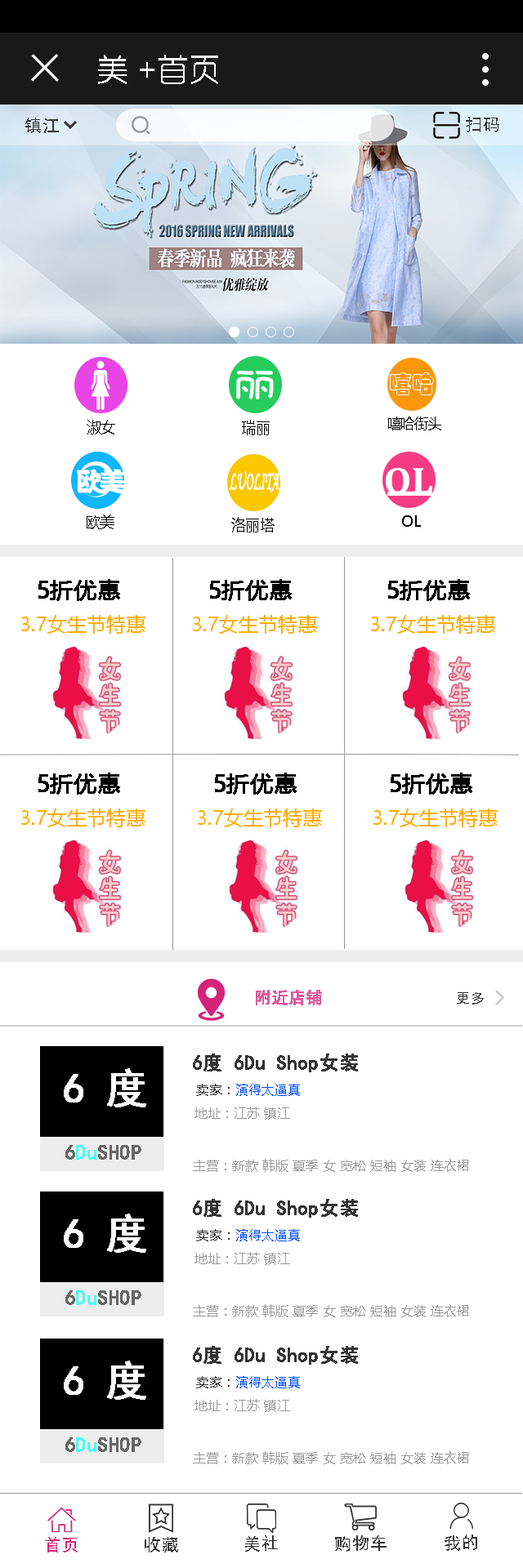
<style>
.page{position:relative;width:523px;height:1568px;background:#ffffff}
.page>*{position:absolute;margin:0}
.t1{font:31px "RTWSYueGoG0v1-ExLight";color:#ffffff;font-weight:bold}
.t2{font:29.4px "SimHei";color:#333333}
.t3{font:24px "STCaiyun";color:#fffefe;scale:0.93 1}
.t4{font:15.6px "MicrosoftYaHei";color:#000000;scale:0.94 1}
.t5{font:15.8px "MicrosoftYaHei";color:#000000;scale:0.93 1}
.t6{font:14.6px "MicrosoftYaHei";color:#000000;scale:0.93 1}
.t7{font:15.7px "MicrosoftYaHei";color:#000000;scale:0.93 1}
.t8{font:15.9px "MicrosoftYaHei";color:#000000;scale:0.92 1}
.t9{font:15.5px "MicrosoftYaHei";color:#000000;scale:0.95 1}
.t10{font:22.9px "MicrosoftYaHei";color:#000000;font-weight:bold}
.t11{font:19.6px "MicrosoftYaHei";color:#ffae00}
.t12{font:27.8px "SimHei";color:#df5a9b;font-weight:bold}
.t13{font:24.5px "SimHei";color:#333333}
.t14{font:19.6px "SimHei";color:#333333;font-weight:bold}
.t15{font:41.4px "SimHei";color:#ffffff;font-weight:bold}
.t16{font:13.1px "MicrosoftYaHei";color:#004eff}
.t17{font:13.1px "MicrosoftYaHei";color:#333333}
.t18{font:13.1px "MicrosoftYaHei";color:#999999}
.t19{font:20.7px "SimHei";color:#666666;font-weight:bold}
.t20{font:20.7px "SimHei";color:#4cfff0;font-weight:bold}
.t21{font:29.4px "SimHei";color:#d4237a}
</style>
<div class="page">
<p class="t1" style="left:98px;top:55px;width:120px;height:29px">美 +首页</p>
<p class="t2" style="left:25px;top:118px;width:34px;height:15px">镇江</p>
<p class="t2" style="left:466px;top:117px;width:33px;height:15px">扫码</p>
<p class="t3" style="left:390px;top:372px;width:44px;height:23px">嘻哈</p>
<p class="t4" style="left:87px;top:420px;width:28px;height:14px">淑女</p>
<p class="t5" style="left:242px;top:420px;width:28px;height:15px">瑞丽</p>
<p class="t6" style="left:388px;top:416px;width:53px;height:14px">嘻哈街头</p>
<p class="t7" style="left:87px;top:514px;width:27px;height:15px">欧美</p>
<p class="t8" style="left:231px;top:517px;width:43px;height:15px">洛丽塔</p>
<p class="t9" style="left:402px;top:515px;width:19px;height:12px">OL</p>
<p class="t10" style="left:38px;top:579px;width:82px;height:22px">5折优惠</p>
<p class="t10" style="left:210px;top:579px;width:82px;height:22px">5折优惠</p>
<p class="t10" style="left:388px;top:579px;width:82px;height:22px">5折优惠</p>
<p class="t11" style="left:21px;top:615px;width:124px;height:19px">3.7女生节特惠</p>
<p class="t11" style="left:193px;top:615px;width:124px;height:19px">3.7女生节特惠</p>
<p class="t11" style="left:371px;top:615px;width:124px;height:19px">3.7女生节特惠</p>
<p class="t10" style="left:38px;top:773px;width:82px;height:22px">5折优惠</p>
<p class="t10" style="left:215px;top:773px;width:81px;height:22px">5折优惠</p>
<p class="t10" style="left:390px;top:773px;width:82px;height:22px">5折优惠</p>
<p class="t11" style="left:21px;top:808px;width:124px;height:19px">3.7女生节特惠</p>
<p class="t11" style="left:198px;top:808px;width:124px;height:19px">3.7女生节特惠</p>
<p class="t11" style="left:373px;top:808px;width:124px;height:19px">3.7女生节特惠</p>
<p class="t12" style="left:256px;top:990px;width:66px;height:15px">附近店铺</p>
<p class="t13" style="left:457px;top:992px;width:26px;height:12px">更多</p>
<p class="t14" style="left:193px;top:1054px;width:165px;height:18px">6度 6Du Shop女装</p>
<p class="t15" style="left:64px;top:1068px;width:82px;height:39px">6 度</p>
<p class="t16" style="left:196px;top:1084px;width:104px;height:12px"><span class="t17">卖家：</span>演得太逼真</p>
<p class="t18" style="left:194px;top:1107px;width:96px;height:13px">地址：江苏 镇江</p>
<p class="t19" style="left:65px;top:1145px;width:76px;height:15px">6<span class="t20">Du</span>SHOP</p>
<p class="t18" style="left:193px;top:1159px;width:276px;height:13px">主营：新款 韩版 夏季 女 宽松 短袖 女装 连衣裙</p>
<p class="t14" style="left:193px;top:1199px;width:165px;height:19px">6度 6Du Shop女装</p>
<p class="t15" style="left:64px;top:1214px;width:82px;height:39px">6 度</p>
<p class="t16" style="left:196px;top:1229px;width:104px;height:12px"><span class="t17">卖家：</span>演得太逼真</p>
<p class="t18" style="left:194px;top:1252px;width:96px;height:13px">地址：江苏 镇江</p>
<p class="t19" style="left:65px;top:1290px;width:76px;height:15px">6<span class="t20">Du</span>SHOP</p>
<p class="t18" style="left:193px;top:1304px;width:276px;height:13px">主营：新款 韩版 夏季 女 宽松 短袖 女装 连衣裙</p>
<p class="t14" style="left:193px;top:1346px;width:165px;height:19px">6度 6Du Shop女装</p>
<p class="t15" style="left:64px;top:1361px;width:82px;height:39px">6 度</p>
<p class="t16" style="left:196px;top:1376px;width:104px;height:12px"><span class="t17">卖家：</span>演得太逼真</p>
<p class="t18" style="left:194px;top:1399px;width:96px;height:13px">地址：江苏 镇江</p>
<p class="t19" style="left:65px;top:1437px;width:76px;height:15px">6<span class="t20">Du</span>SHOP</p>
<p class="t18" style="left:193px;top:1451px;width:276px;height:13px">主营：新款 韩版 夏季 女 宽松 短袖 女装 连衣裙</p>
<p class="t21" style="left:45px;top:1537px;width:33px;height:15px;rotate:-1deg">首页</p>
<p class="t2" style="left:145px;top:1537px;width:33px;height:15px;rotate:-1deg">收藏</p>
<p class="t2" style="left:245px;top:1535px;width:33px;height:17px;rotate:-1deg">美社</p>
<p class="t2" style="left:335px;top:1535px;width:51px;height:17px;rotate:-1deg">购物车</p>
<p class="t2" style="left:444px;top:1535px;width:33px;height:16px;rotate:-1deg">我的</p>
</div>
